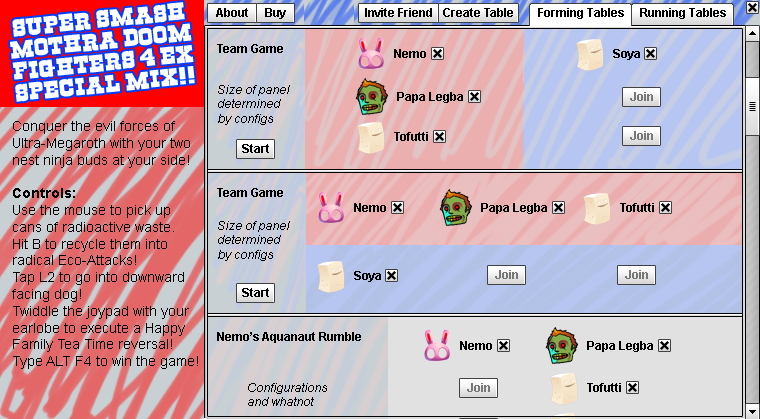
<style>
.page{position:relative;width:760px;height:419px}
.page>*{position:absolute;margin:0}
.t1{font:18px "Cowboys";color:#ffffff}
.t2{font:12px "Arial-BoldMT";color:#000000}
.t3{font:12px "Arial-ItalicMT";color:#000000}
.t4{font:12px "Arial-BoldMT";color:#777777}
.t5{font:14px "ArialMT";color:#000000}
.t6{font:14px "Arial-BoldMT";color:#000000}
</style>
<div class="page">
<p class="t1" style="left:10px;top:2px;width:185px;height:100px;text-align:center;rotate:-6deg">Super Smash<br>Mothra Doom<br>Fighters 4 EX<br>Special Mix!!</p>
<p class="t2" style="left:216px;top:8px;width:32px;height:9px">About</p>
<p class="t2" style="left:265px;top:8px;width:21px;height:11px">Buy</p>
<p class="t2" style="left:365px;top:8px;width:67px;height:9px">Invite Friend</p>
<p class="t2" style="left:443px;top:8px;width:70px;height:9px">Create Table</p>
<p class="t2" style="left:538px;top:8px;width:86px;height:11px">Forming Tables</p>
<p class="t2" style="left:640px;top:8px;width:86px;height:11px">Running Tables</p>
<p class="t2" style="left:217px;top:44px;width:66px;height:9px">Team Game</p>
<p class="t2" style="left:394px;top:49px;width:32px;height:9px">Nemo</p>
<p class="t2" style="left:613px;top:49px;width:27px;height:11px">Soya</p>
<p class="t3" style="left:218px;top:85px;width:72px;height:40px">Size of panel<br>determined<br>by configs</p>
<p class="t2" style="left:397px;top:92px;width:66px;height:11px">Papa Legba</p>
<p class="t4" style="left:630px;top:92px;width:23px;height:9px">Join</p>
<p class="t5" style="left:12px;top:121px;width:186px;height:248px">Conquer the evil forces of<br>Ultra-Megaroth with your two<br>nest ninja buds at your side!<br><br><span class="t6">Controls:<br></span>Use the mouse to pick up<br>cans of radioactive waste.<br>Hit B to recycle them into<br>radical Eco-Attacks!<br>Tap L2 to go into downward<br>facing dog!<br>Twiddle the joypad with your<br>earlobe to execute a Happy<br>Family Tea Time reversal!<br>Type ALT F4 to win the game!</p>
<p class="t2" style="left:394px;top:132px;width:34px;height:9px">Tofutti</p>
<p class="t4" style="left:630px;top:131px;width:23px;height:9px">Join</p>
<p class="t2" style="left:242px;top:144px;width:27px;height:9px">Start</p>
<p class="t2" style="left:217px;top:188px;width:66px;height:9px">Team Game</p>
<p class="t2" style="left:354px;top:203px;width:32px;height:9px">Nemo</p>
<p class="t2" style="left:481px;top:203px;width:66px;height:11px">Papa Legba</p>
<p class="t2" style="left:620px;top:203px;width:34px;height:9px">Tofutti</p>
<p class="t3" style="left:218px;top:221px;width:72px;height:40px">Size of panel<br>determined<br>by configs</p>
<p class="t4" style="left:495px;top:270px;width:23px;height:9px">Join</p>
<p class="t4" style="left:625px;top:270px;width:23px;height:9px">Join</p>
<p class="t2" style="left:354px;top:271px;width:27px;height:11px">Soya</p>
<p class="t2" style="left:242px;top:288px;width:27px;height:9px">Start</p>
<p class="t2" style="left:217px;top:332px;width:144px;height:11px">Nemo’s Aquanaut Rumble</p>
<p class="t2" style="left:460px;top:341px;width:32px;height:9px">Nemo</p>
<p class="t2" style="left:587px;top:341px;width:66px;height:11px">Papa Legba</p>
<p class="t3" style="left:248px;top:383px;width:79px;height:23px">Configurations<br>and whatnot</p>
<p class="t4" style="left:467px;top:383px;width:23px;height:9px">Join</p>
<p class="t2" style="left:587px;top:383px;width:34px;height:9px">Tofutti</p>
</div>
